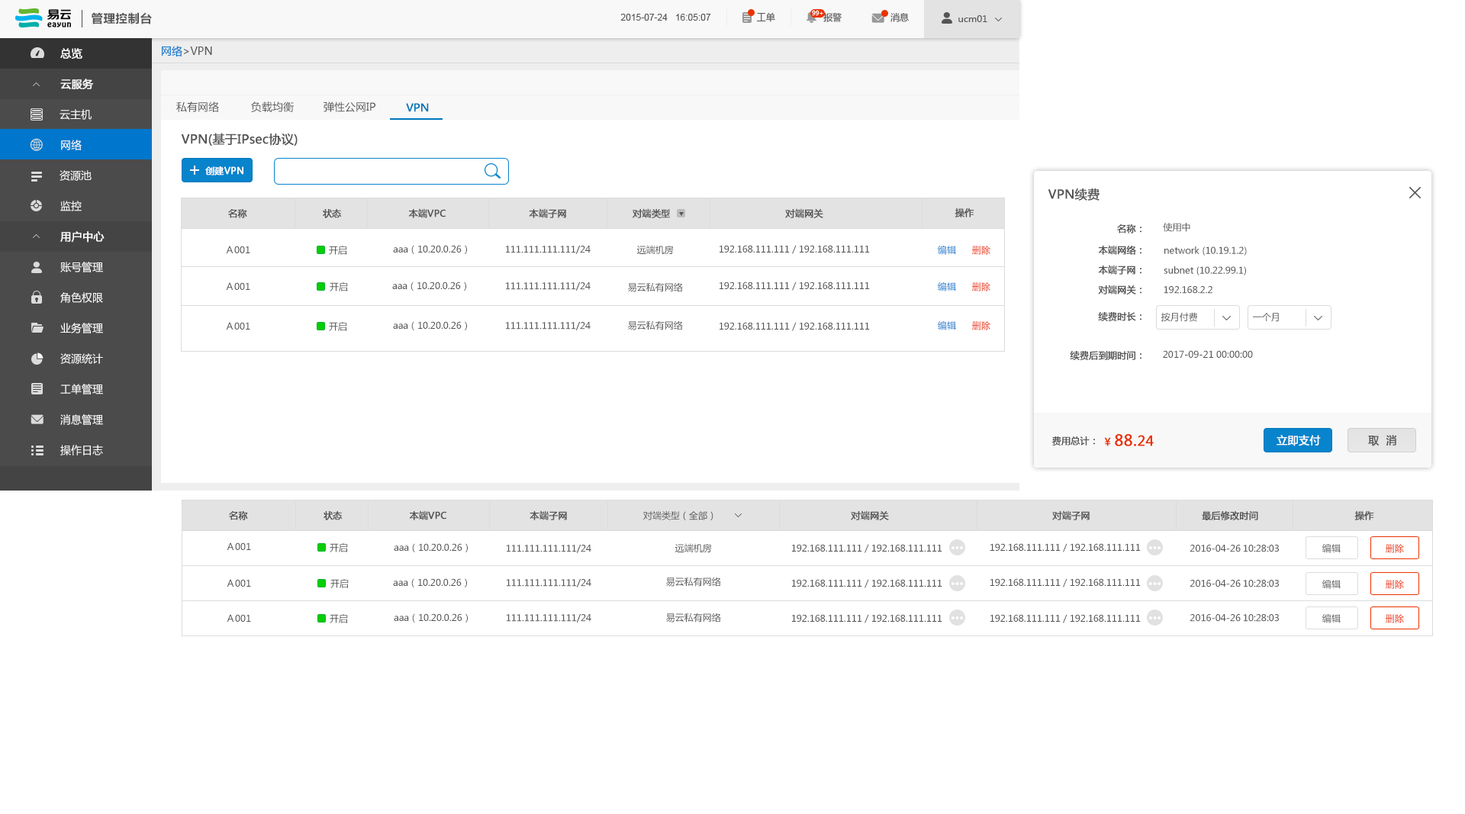
<style>
.page{position:relative;width:1465px;height:814px;background:#ffffff}
.page>*{position:absolute;margin:0}
.t1{font:12.2px "FZLTCHK--GBK1-0";color:#555555}
.t2{font:9.2px "ArialMT";color:#555555}
.t3{font:9.2px "MicrosoftYaHei";color:#555555}
.t4{font:6.1px "MicrosoftYaHei";color:#ffffff}
.t5{font:10.7px "MicrosoftYaHei";color:#ffffff;font-weight:bold}
.t6{font:10.7px "MicrosoftYaHei";color:#555555}
.t7{font:10.7px "MicrosoftYaHei";color:#0077cc}
.t8{font:10.7px "MicrosoftYaHei";color:#ffffff}
.t9{font:10.7px "MicrosoftYaHei";color:#0077bb;font-weight:bold}
.t10{font:12.2px "MicrosoftYaHei";color:#555555;font-weight:bold}
.t11{font:9.2px "MicrosoftYaHei";color:#ffffff;font-weight:bold}
.t12{font:9.2px "MicrosoftYaHei";color:#555555;font-weight:bold}
.t13{font:9.2px "MicrosoftYaHei"}
.t14{font:15.3px "MicrosoftYaHei";color:#ea3200;font-weight:bold}
.t15{font:10.7px "MicrosoftYaHei";color:#ea3200;font-weight:bold}
.t16{font:13.7px "MicrosoftYaHei";color:#ea3200;font-weight:bold}
.t17{font:10.7px "MicrosoftYaHei";color:#555555;font-weight:bold}
</style>
<div class="page">
<p class="t1" style="left:92px;top:12px;width:60px;height:12px">管理控制台</p>
<p class="t2" style="left:620px;top:14px;width:91px;height:7px">2015-07-24   16:05:07</p>
<p class="t3" style="left:757px;top:12px;width:18px;height:10px">工单</p>
<p class="t4" style="left:812px;top:10px;width:11px;height:6px">99+</p>
<p class="t3" style="left:823px;top:12px;width:19px;height:10px">报警</p>
<p class="t3" style="left:890px;top:12px;width:19px;height:10px">消息</p>
<p class="t3" style="left:958px;top:15px;width:29px;height:7px"><span class="t5"> </span>ucm01</p>
<p class="t5" style="left:60px;top:48px;width:22px;height:11px">总览</p>
<p class="t6" style="left:162px;top:46px;width:50px;height:11px"><span class="t7">网络</span>&gt;VPN</p>
<p class="t5" style="left:60px;top:79px;width:34px;height:10px">云服务</p>
<p class="t6" style="left:176px;top:101px;width:43px;height:11px">私有网络</p>
<p class="t6" style="left:251px;top:101px;width:43px;height:11px">负载均衡</p>
<p class="t6" style="left:323px;top:101px;width:52px;height:11px">弹性公网IP</p>
<p class="t8" style="left:60px;top:109px;width:32px;height:11px">云主机</p>
<p class="t9" style="left:406px;top:103px;width:23px;height:9px">VPN</p>
<p class="t10" style="left:181px;top:133px;width:117px;height:13px">VPN(基于IPsec协议)</p>
<p class="t8" style="left:61px;top:140px;width:21px;height:10px">网络</p>
<p class="t8" style="left:60px;top:170px;width:32px;height:11px">资源池</p>
<p class="t11" style="left:205px;top:166px;width:38px;height:9px">创建VPN</p>
<p class="t10" style="left:1048px;top:188px;width:51px;height:13px">VPN续费</p>
<p class="t8" style="left:60px;top:201px;width:22px;height:10px">监控</p>
<p class="t12" style="left:228px;top:209px;width:19px;height:9px">名称</p>
<p class="t12" style="left:323px;top:209px;width:19px;height:9px">状态</p>
<p class="t12" style="left:408px;top:208px;width:38px;height:10px">本端VPC</p>
<p class="t12" style="left:529px;top:208px;width:37px;height:10px">本端子网</p>
<p class="t12" style="left:632px;top:208px;width:38px;height:10px">对端类型</p>
<p class="t12" style="left:785px;top:208px;width:38px;height:10px">对端网关</p>
<p class="t12" style="left:954px;top:208px;width:20px;height:9px">操作</p>
<p class="t5" style="left:60px;top:231px;width:45px;height:12px">用户中心</p>
<p class="t12" style="left:1117px;top:224px;width:24px;height:9px">名称：</p>
<p class="t3" style="left:1163px;top:223px;width:27px;height:9px">使用中</p>
<p class="t3" style="left:226px;top:246px;width:24px;height:7px">Ａ001</p>
<p class="t3" style="left:329px;top:245px;width:18px;height:10px">开启</p>
<p class="t3" style="left:393px;top:245px;width:74px;height:9px">aaa（10.20.0.26）</p>
<p class="t3" style="left:506px;top:246px;width:85px;height:8px">111.111.111.111/24</p>
<p class="t3" style="left:636px;top:245px;width:38px;height:10px">远端机房</p>
<p class="t3" style="left:719px;top:245px;width:151px;height:9px">192.168.111.111／192.168.111.111</p>
<p class="t13" style="left:938px;top:246px;width:18px;height:9px">编辑</p>
<p class="t13" style="left:972px;top:246px;width:18px;height:9px">删除</p>
<p class="t12" style="left:1098px;top:245px;width:43px;height:10px">本端网络：</p>
<p class="t3" style="left:1164px;top:246px;width:83px;height:10px">network (10.19.1.2)</p>
<p class="t8" style="left:60px;top:262px;width:43px;height:10px">账号管理</p>
<p class="t12" style="left:1098px;top:265px;width:43px;height:10px">本端子网：</p>
<p class="t3" style="left:1163px;top:266px;width:83px;height:9px">subnet (10.22.99.1)</p>
<p class="t3" style="left:330px;top:282px;width:18px;height:9px">开启</p>
<p class="t3" style="left:392px;top:282px;width:74px;height:9px">aaa（10.20.0.26）</p>
<p class="t3" style="left:719px;top:282px;width:151px;height:9px">192.168.111.111／192.168.111.111</p>
<p class="t8" style="left:60px;top:292px;width:43px;height:11px">角色权限</p>
<p class="t3" style="left:226px;top:282px;width:24px;height:8px">Ａ001</p>
<p class="t3" style="left:506px;top:282px;width:85px;height:9px">111.111.111.111/24</p>
<p class="t3" style="left:628px;top:282px;width:55px;height:10px">易云私有网络</p>
<p class="t13" style="left:938px;top:282px;width:18px;height:9px">编辑</p>
<p class="t13" style="left:972px;top:282px;width:18px;height:9px">删除</p>
<p class="t12" style="left:1098px;top:285px;width:43px;height:9px">对端网关：</p>
<p class="t3" style="left:1163px;top:286px;width:49px;height:8px">192.168.2.2</p>
<p class="t12" style="left:1098px;top:312px;width:43px;height:9px">续费时长：</p>
<p class="t3" style="left:1161px;top:312px;width:36px;height:10px">按月付费</p>
<p class="t3" style="left:1253px;top:313px;width:26px;height:9px">一个月</p>
<p class="t8" style="left:60px;top:323px;width:43px;height:10px">业务管理</p>
<p class="t3" style="left:226px;top:322px;width:24px;height:8px">Ａ001</p>
<p class="t3" style="left:329px;top:321px;width:18px;height:10px">开启</p>
<p class="t3" style="left:393px;top:321px;width:74px;height:9px">aaa（10.20.0.26）</p>
<p class="t3" style="left:506px;top:322px;width:85px;height:8px">111.111.111.111/24</p>
<p class="t3" style="left:628px;top:320px;width:55px;height:10px">易云私有网络</p>
<p class="t3" style="left:719px;top:322px;width:151px;height:9px">192.168.111.111／192.168.111.111</p>
<p class="t13" style="left:938px;top:321px;width:18px;height:9px">编辑</p>
<p class="t13" style="left:972px;top:321px;width:18px;height:9px">删除</p>
<p class="t8" style="left:60px;top:353px;width:43px;height:11px">资源统计</p>
<p class="t12" style="left:1070px;top:351px;width:71px;height:9px">续费后到期时间：</p>
<p class="t3" style="left:1163px;top:350px;width:90px;height:8px">2017-09-21 00:00:00</p>
<p class="t8" style="left:60px;top:384px;width:43px;height:10px">工单管理</p>
<p class="t8" style="left:60px;top:414px;width:43px;height:11px">消息管理</p>
<p class="t12" style="left:1051px;top:436px;width:44px;height:10px">费用总计：</p>
<p class="t14" style="left:1104px;top:434px;width:50px;height:12px"><span class="t15">¥ </span>88.<span class="t16">24</span></p>
<p class="t5" style="left:1276px;top:435px;width:45px;height:11px">立即支付</p>
<p class="t17" style="left:1368px;top:435px;width:29px;height:11px">取  消</p>
<p class="t8" style="left:60px;top:445px;width:43px;height:10px">操作日志</p>
<p class="t12" style="left:229px;top:511px;width:19px;height:9px">名称</p>
<p class="t12" style="left:323px;top:511px;width:20px;height:9px">状态</p>
<p class="t12" style="left:409px;top:510px;width:37px;height:10px">本端VPC</p>
<p class="t12" style="left:529px;top:510px;width:38px;height:10px">本端子网</p>
<p class="t3" style="left:643px;top:510px;width:70px;height:10px">对端类型（全部）</p>
<p class="t12" style="left:851px;top:510px;width:38px;height:10px">对端网关</p>
<p class="t12" style="left:1052px;top:510px;width:37px;height:10px">对端子网</p>
<p class="t12" style="left:1202px;top:511px;width:56px;height:9px">最后修改时间</p>
<p class="t12" style="left:1354px;top:511px;width:20px;height:9px">操作</p>
<p class="t3" style="left:227px;top:542px;width:24px;height:8px">Ａ001</p>
<p class="t3" style="left:330px;top:542px;width:18px;height:10px">开启</p>
<p class="t3" style="left:394px;top:543px;width:74px;height:9px">aaa（10.20.0.26）</p>
<p class="t3" style="left:507px;top:545px;width:84px;height:8px">111.111.111.111/24</p>
<p class="t3" style="left:674px;top:543px;width:38px;height:10px">远端机房</p>
<p class="t3" style="left:792px;top:544px;width:150px;height:9px">192.168.111.111／192.168.111.111</p>
<p class="t3" style="left:990px;top:543px;width:151px;height:9px">192.168.111.111／192.168.111.111</p>
<p class="t3" style="left:1189px;top:545px;width:90px;height:7px">2016-04-26 10:28:03</p>
<p class="t13" style="left:1322px;top:544px;width:18px;height:9px">编辑</p>
<p class="t13" style="left:1385px;top:544px;width:19px;height:9px">删除</p>
<p class="t3" style="left:227px;top:579px;width:24px;height:8px">Ａ001</p>
<p class="t3" style="left:330px;top:578px;width:19px;height:10px">开启</p>
<p class="t3" style="left:393px;top:578px;width:74px;height:9px">aaa（10.20.0.26）</p>
<p class="t3" style="left:507px;top:579px;width:84px;height:8px">111.111.111.111/24</p>
<p class="t3" style="left:666px;top:577px;width:55px;height:10px">易云私有网络</p>
<p class="t3" style="left:792px;top:579px;width:150px;height:9px">192.168.111.111／192.168.111.111</p>
<p class="t3" style="left:990px;top:578px;width:151px;height:9px">192.168.111.111／192.168.111.111</p>
<p class="t3" style="left:1189px;top:580px;width:90px;height:7px">2016-04-26 10:28:03</p>
<p class="t13" style="left:1322px;top:580px;width:18px;height:9px">编辑</p>
<p class="t13" style="left:1385px;top:580px;width:19px;height:9px">删除</p>
<p class="t3" style="left:227px;top:614px;width:24px;height:8px">Ａ001</p>
<p class="t3" style="left:330px;top:613px;width:18px;height:10px">开启</p>
<p class="t3" style="left:394px;top:613px;width:74px;height:10px">aaa（10.20.0.26）</p>
<p class="t3" style="left:507px;top:614px;width:84px;height:9px">111.111.111.111/24</p>
<p class="t3" style="left:666px;top:613px;width:55px;height:10px">易云私有网络</p>
<p class="t3" style="left:792px;top:614px;width:150px;height:9px">192.168.111.111／192.168.111.111</p>
<p class="t3" style="left:990px;top:614px;width:151px;height:9px">192.168.111.111／192.168.111.111</p>
<p class="t3" style="left:1189px;top:614px;width:90px;height:8px">2016-04-26 10:28:03</p>
<p class="t13" style="left:1322px;top:614px;width:18px;height:9px">编辑</p>
<p class="t13" style="left:1385px;top:614px;width:19px;height:9px">删除</p>
</div>
